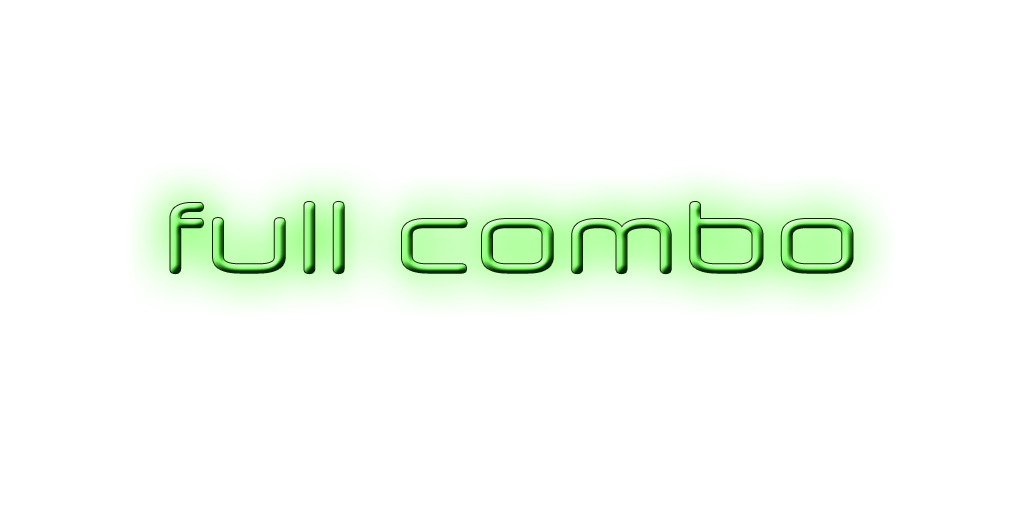
<style>
.page{position:relative;width:1024px;height:512px;background:#ffffff}
.page>*{position:absolute;margin:0}
.t1{font:100px "NeuropolXFree"}
</style>
<div class="page">
<p class="t1" style="left:170px;top:202px;width:683px;height:72px">full combo</p>
</div>
